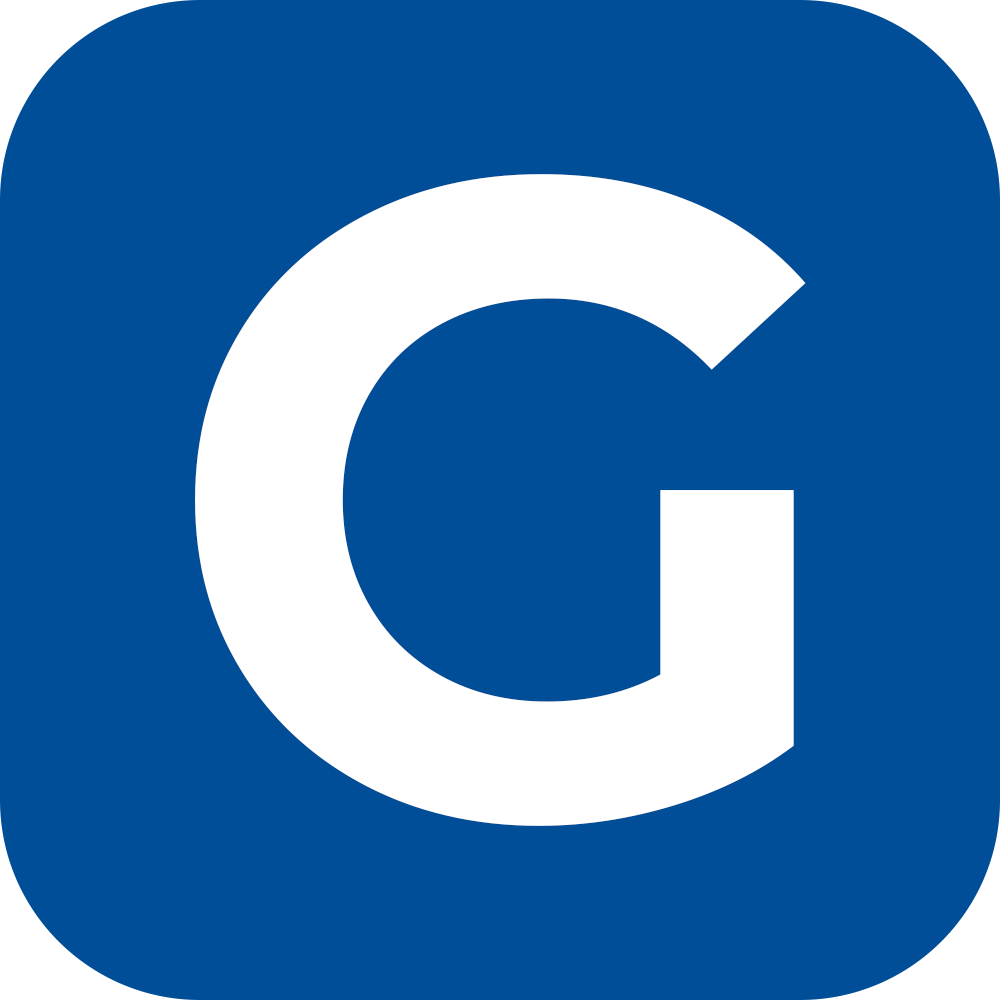
<style>
.page{position:relative;width:1000px;height:1000px;background:#004e98}
.page>*{position:absolute;margin:0}
.t1{font:900px "Montserrat-Bold";color:#ffffff}
</style>
<div class="page">
<p class="t1" style="left:195px;top:174px;width:611px;height:652px">G</p>
</div>
